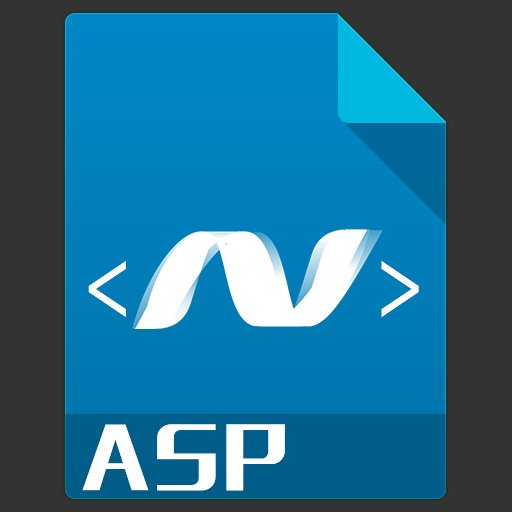
<style>
.page{position:relative;width:512px;height:512px;background:#333333}
.page>*{position:absolute;margin:0}
.t1{font:72px "MFLiHei_Noncommercial-Regular";letter-spacing:0.07em;color:#ffffff}
</style>
<div class="page">
<p class="t1" style="left:82px;top:424px;width:203px;height:67px">ASP</p>
</div>
